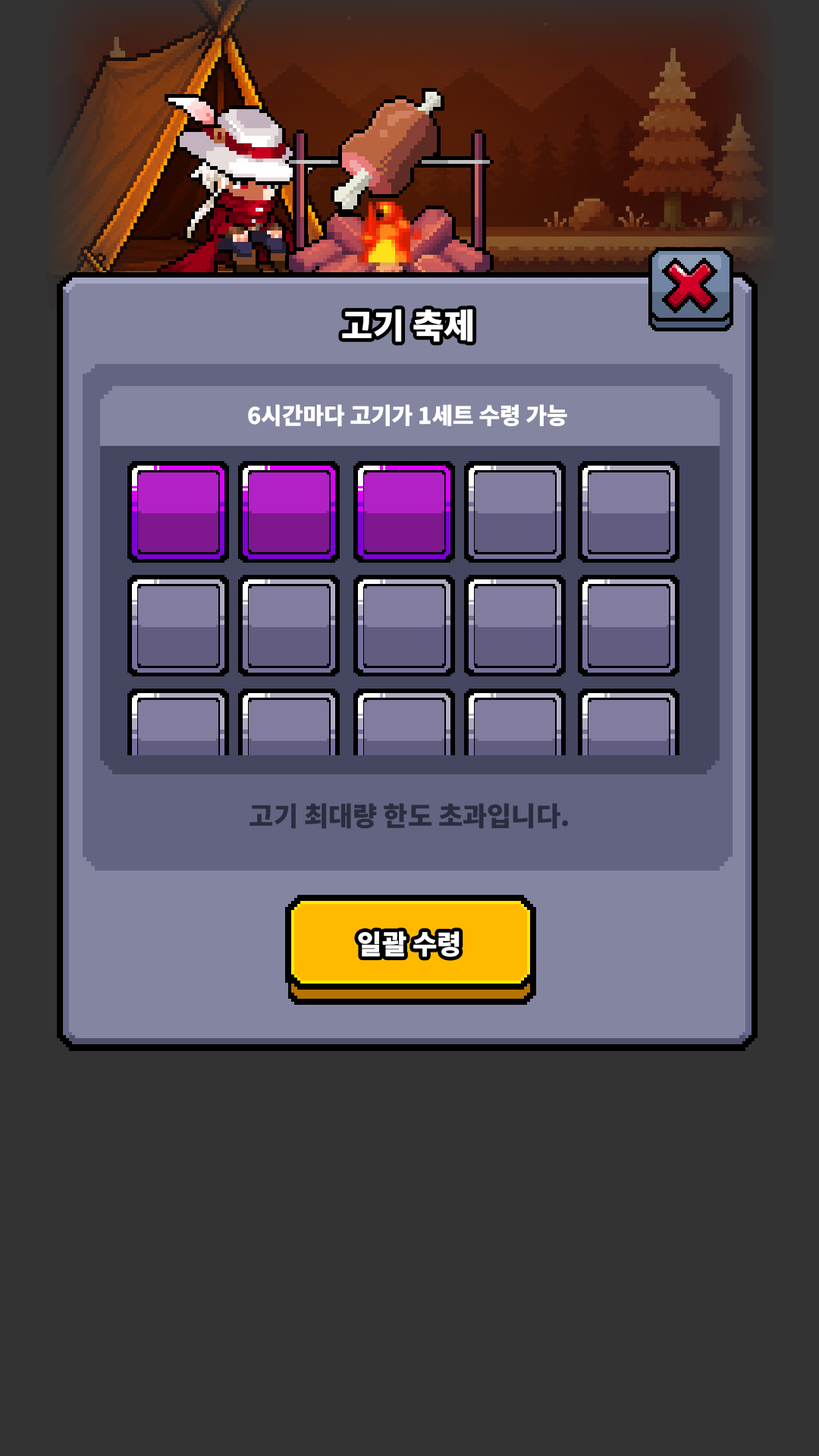
<style>
.page{position:relative;width:819px;height:1456px;background:#333333}
.page>*{position:absolute;margin:0}
.t1{font:34.1px "NotoSansKR-Black";color:#ffffff}
.t2{font:22.7px "NotoSansKR-Black";color:#ffffff}
.t3{font:26.5px "NotoSansKR-Black";color:#2b2c3f}
.t4{font:26.5px "NotoSansKR-Black";color:#ffffff}
</style>
<div class="page">
<p class="t1" style="left:342px;top:309px;width:131px;height:33px">고기 축제</p>
<p class="t2" style="left:248px;top:404px;width:319px;height:23px">6시간마다 고기가 1세트 수령 가능</p>
<p class="t3" style="left:249px;top:803px;width:319px;height:26px">고기 최대량 한도 초과입니다.</p>
<p class="t4" style="left:358px;top:931px;width:102px;height:26px">일괄 수령</p>
</div>
